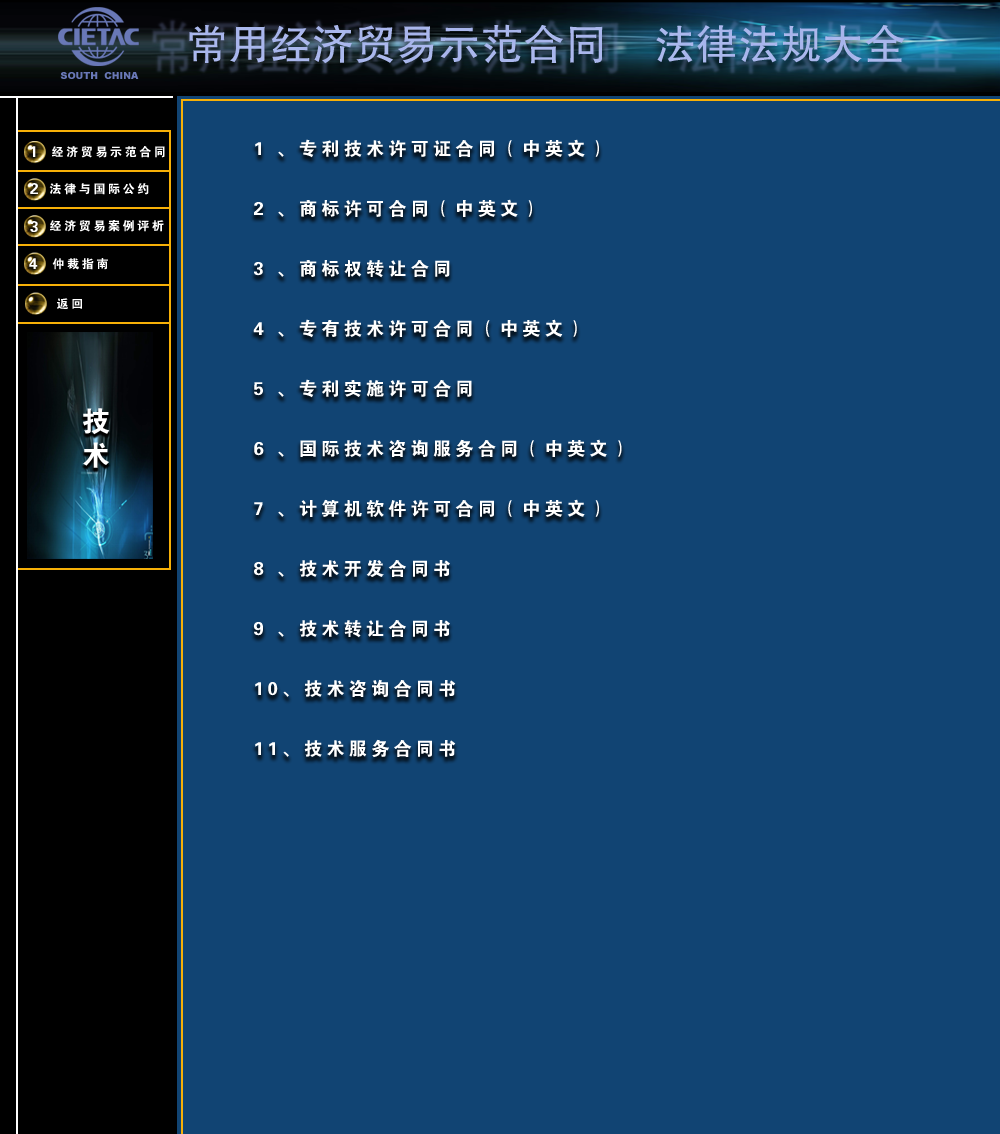
<style>
.page{position:relative;width:1000px;height:1134px;background:#114473}
.page>*{position:absolute;margin:0}
.t1{font:15.4px "FZDHTJW--GB1-0";letter-spacing:0.2em;color:#ffffff}
.t2{font:12.2px "FZDHTJW--GB1-0";letter-spacing:0.2em;color:#ffffff}
.t3{font:18.6px/20px "FZDHTJW--GB1-0";letter-spacing:0.2em;color:#ffffff}
.t4{font:28.4px/27.3px "FZDHTJW--GB1-0";letter-spacing:0.2em;color:#ffffff}
</style>
<div class="page">
<p class="t1" style="left:30px;top:146px;width:6px;height:11px">1</p>
<p class="t2" style="left:52px;top:146px;width:113px;height:12px">经济贸易示范合同</p>
<p class="t3" style="left:253px;top:139px;width:369px;height:618px">1 、专利技术许可证合同（中英文）<br><br><br>2 、商标许可合同（中英文）<br><br><br>3 、商标权转让合同 <br><br>　<br>4 、专有技术许可合同（中英文）<br><br> <br>5 、专利实施许可合同<br><br><br>6 、国际技术咨询服务合同（中英文）<br><br><br>7 、计算机软件许可合同（中英文）<br><br><br>8 、技术开发合同书 <br><br><br>9 、技术转让合同书<br><br> <br>10、技术咨询合同书<br><br> <br>11、技术服务合同书</p>
<p class="t1" style="left:30px;top:183px;width:8px;height:11px">2</p>
<p class="t2" style="left:49px;top:183px;width:100px;height:12px">法律与国际公约</p>
<p class="t1" style="left:30px;top:221px;width:8px;height:11px">3</p>
<p class="t2" style="left:50px;top:220px;width:114px;height:12px">经济贸易案例评析</p>
<p class="t1" style="left:29px;top:258px;width:9px;height:11px">4</p>
<p class="t2" style="left:52px;top:258px;width:56px;height:12px">仲裁指南</p>
<p class="t4" style="left:83px;top:408px;width:27px;height:60px">技术</p>
</div>
